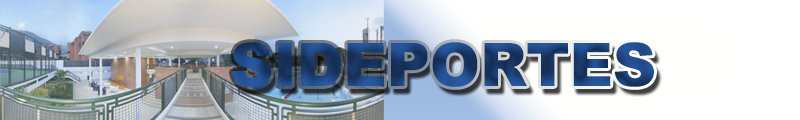
<style>
.page{position:relative;width:800px;height:120px}
.page>*{position:absolute;margin:0}
.t1{font:60px "Arial-Black"}
</style>
<div class="page">
<p class="t1" style="left:232px;top:42px;width:422px;height:45px">SIDEPORTES</p>
</div>
